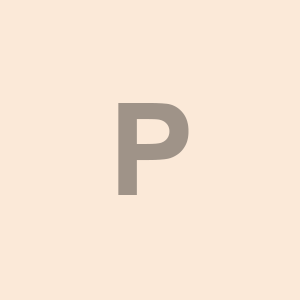
<style>
.page{position:relative;width:300px;height:300px;background:#fbe9d8}
.page>*{position:absolute;margin:0}
.t1{font:127.7px "Arial-BoldMT";color:#9f9388}
</style>
<div class="page">
<p class="t1" style="left:118px;top:103px;width:71px;height:92px">P</p>
</div>
